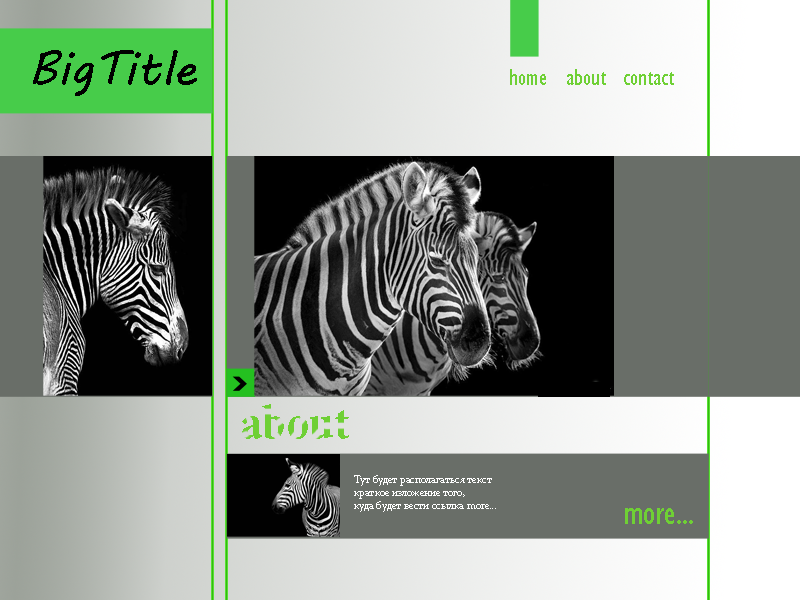
<style>
.page{position:relative;width:800px;height:600px}
.page>*{position:absolute;margin:0}
.t1{font:48px "MVBoli";color:#000000}
.t2{font:24px "GillSansMT-Condensed";color:#6fd035}
.t3{font:11px "MinionPro-Regular";color:#ffffff}
.t4{font:36px "GillSansMT-Condensed";color:#6fd035}
</style>
<div class="page">
<p class="t1" style="left:33px;top:50px;width:164px;height:46px">BigTitle</p>
<p class="t2" style="left:510px;top:69px;width:36px;height:16px">home</p>
<p class="t2" style="left:567px;top:69px;width:39px;height:16px">about</p>
<p class="t2" style="left:624px;top:72px;width:50px;height:13px">contact</p>
<p class="t3" style="left:354px;top:475px;width:142px;height:37px">Тут будет располагаться текст<br>краткое изложение того,<br>куда будет вести ссылка more...</p>
<p class="t4" style="left:625px;top:508px;width:68px;height:16px">more...</p>
</div>
